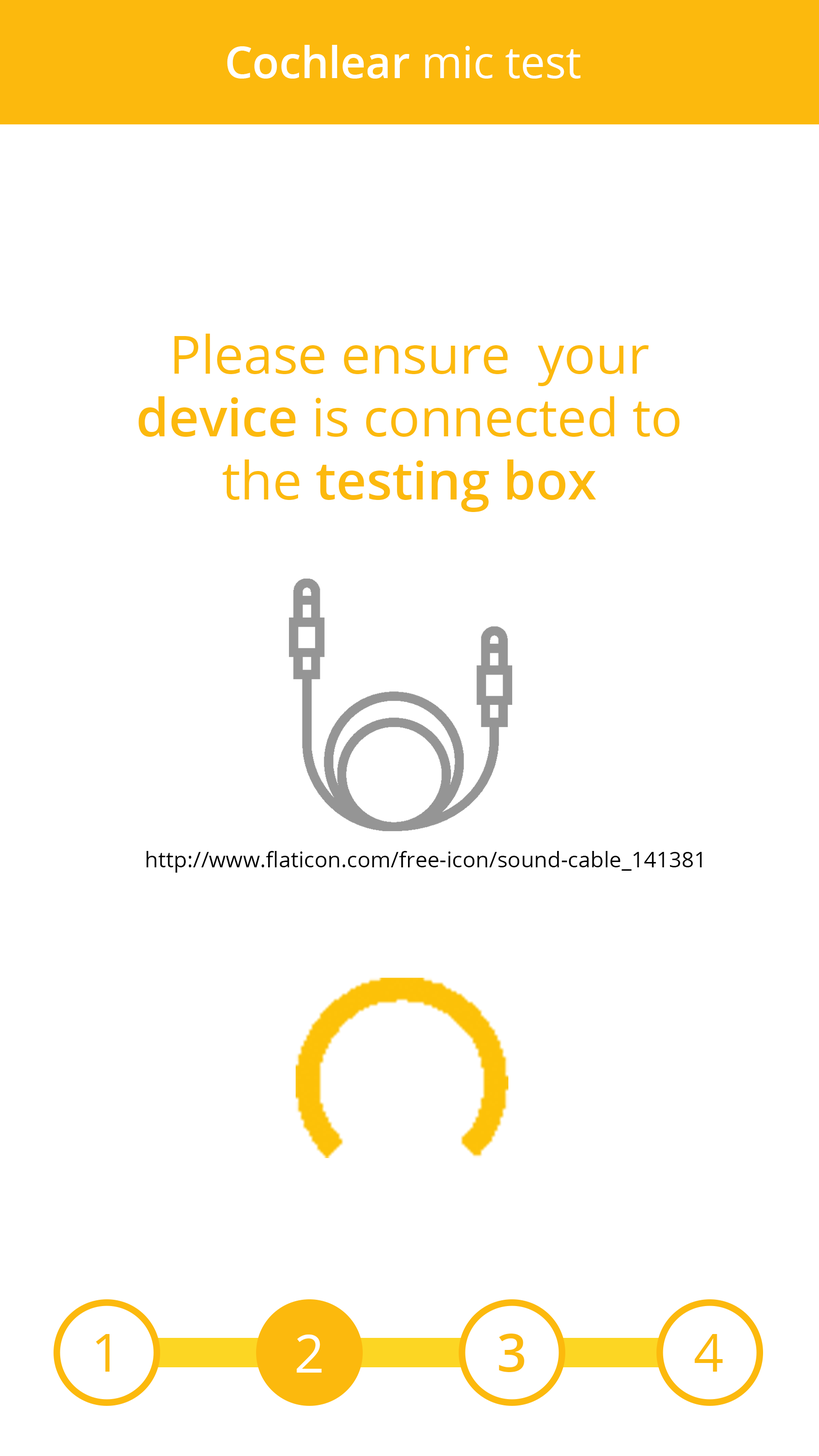
<style>
.page{position:relative;width:819px;height:1456px;background:#ffffff}
.page>*{position:absolute;margin:0}
.t1{font:43.7px "OpenSans-Semibold";color:#ffffff}
.t2{font:43.7px "OpenSans";color:#ffffff}
.t3{font:52.4px "OpenSans";color:#fcb90d}
.t4{font:52.4px "OpenSans-Semibold";color:#fcb90d}
.t5{font:21.8px "OpenSans";color:#000000}
.t6{font:52.4px "OpenSans";color:#ffffff}
</style>
<div class="page">
<p class="t1" style="left:227px;top:45px;width:354px;height:34px">Cochlear <span class="t2">mic test</span></p>
<p class="t3" style="left:138px;top:334px;width:541px;height:178px;text-align:center">Please ensure  your <span class="t4">device</span> is connected to the <span class="t4">testing box</span></p>
<p class="t5" style="left:146px;top:851px;width:556px;height:22px">http://www.flaticon.com/free-icon/sound-cable_141381</p>
<p class="t3" style="left:95px;top:1334px;width:15px;height:38px">1</p>
<p class="t6" style="left:297px;top:1335px;width:25px;height:38px">2</p>
<p class="t4" style="left:499px;top:1334px;width:25px;height:38px">3</p>
<p class="t3" style="left:694px;top:1334px;width:29px;height:38px">4</p>
</div>
